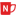
<style>
.page{position:relative;width:16px;height:16px;background:#ffffff}
.page>*{position:absolute;margin:0}
.t1{font:8px "NanumSquareR";color:#ffffff}
</style>
<div class="page">
<p class="t1" style="left:3px;top:5px;width:5px;height:7px">N</p>
</div>
